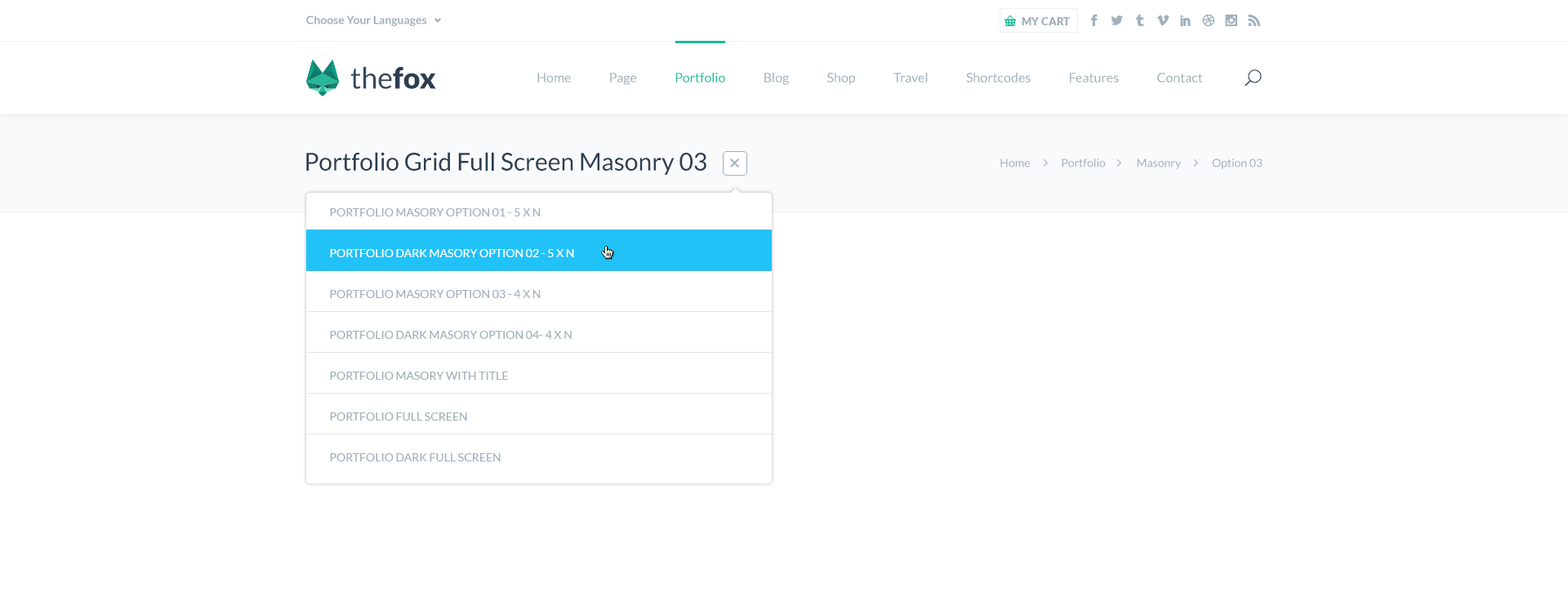
<style>
.page{position:relative;width:1568px;height:606px;background:#ffffff}
.page>*{position:absolute;margin:0}
.t1{font:11.4px "Lato-Bold";color:#a1b1bc}
.t2{font:10.6px "Lato-Black";color:#a1b1bc;text-transform:uppercase}
.t3{font:29.4px "Lato-Regular";color:#34495e}
.t4{font:29.4px "Lato-Black";color:#2c3e50}
.t5{font:13.1px "Lato-Regular";color:#a1b1bc}
.t6{font:13.1px "Lato-Regular";color:#1abc9c}
.t7{font:24.5px "Lato-Regular";color:#2c3e50}
.t8{font:11.4px "Lato-Regular";color:#a1b1bc}
.t9{font:11.4px/40.8px "Lato-Regular";color:#a1b1bc;text-transform:uppercase}
.t10{font:11.4px/40.8px "Lato-Regular";color:#ffffff;text-transform:uppercase}
</style>
<div class="page">
<p class="t1" style="left:306px;top:16px;width:121px;height:10px">Choose Your Languages</p>
<p class="t2" style="left:1022px;top:17px;width:48px;height:8px">my cart</p>
<p class="t3" style="left:350px;top:66px;width:86px;height:23px">the<span class="t4">fox</span></p>
<p class="t5" style="left:537px;top:73px;width:666px;height:12px">Home               Page               <span class="t6">Portfolio</span>               Blog               Shop               Travel               Shortcodes               Features               Contact</p>
<p class="t7" style="left:306px;top:152px;width:400px;height:23px">Portfolio Grid Full Screen Masonry 03</p>
<p class="t8" style="left:1000px;top:158px;width:263px;height:11px">Home              Portfolio              Masonry              Option 03</p>
<p class="t9" style="left:330px;top:208px;width:244px;height:253px">Portfolio masory option 01 - 5 x n <br><span class="t10">Portfolio dark masory option 02 - 5 x n <br></span>Portfolio masory option 03 - 4 x n <br>Portfolio dark masory option 04- 4 x n <br>portfolio masory with title<br>portfolio full screen<br>portfolio dark full screen</p>
</div>
